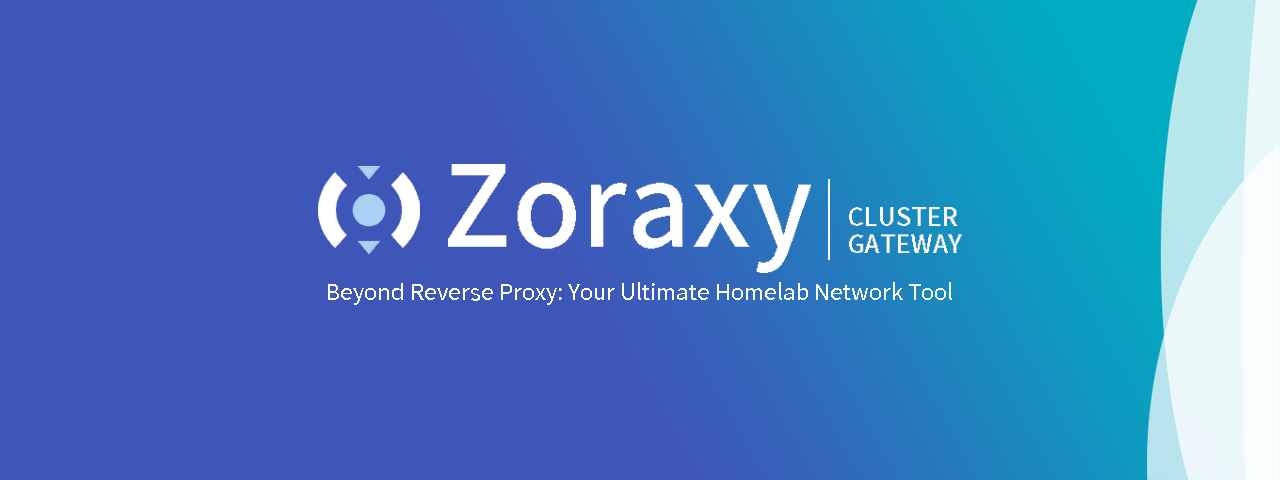
<style>
.page{position:relative;width:1280px;height:480px;background:#3f56b9}
.page>*{position:absolute;margin:0}
.t1{font:112.3px "NotoSansCJKhk-Medium";color:#ffffff}
.t2{font:24.9px/27.3px "NotoSansCJKhk-Medium";color:#ffffff}
.t3{font:22.3px "TaipeiSansTCBeta-Regular";color:#ffffff}
</style>
<div class="page">
<p class="t1" style="left:448px;top:164px;width:363px;height:109px">Zoraxy</p>
<p class="t2" style="left:849px;top:207px;width:113px;height:46px">CLUSTER<br>GATEWAY</p>
<p class="t3" style="left:328px;top:282px;width:624px;height:23px">Beyond Reverse Proxy: Your Ultimate Homelab Network Tool</p>
</div>
